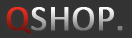
<style>
.page{position:relative;width:132px;height:38px;background:#333333}
.page>*{position:absolute;margin:0}
.t1{font:36px "Calibri";font-weight:bold}
</style>
<div class="page">
<p class="t1" style="left:6px;top:7px;width:117px;height:27px">QSHOP.</p>
</div>
